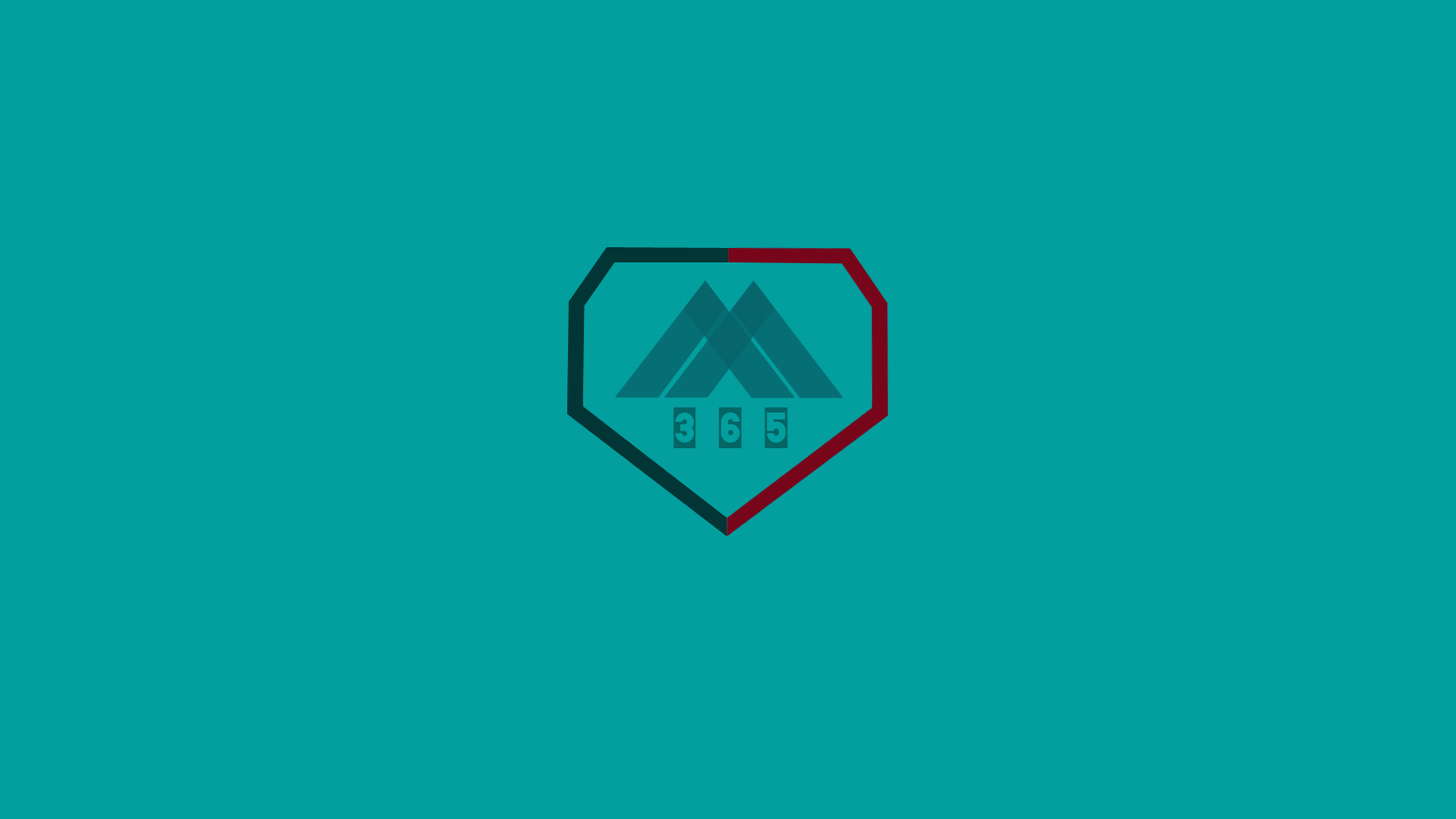
<style>
.page{position:relative;width:1456px;height:819px;background:#039e9e}
.page>*{position:absolute;margin:0}
.t1{font:48.5px "Blackout-2AM";color:#046565}
</style>
<div class="page">
<p class="t1" style="left:673px;top:407px;width:115px;height:41px">3 6 5</p>
</div>
